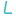
<style>
.page{position:relative;width:16px;height:16px;background:#ffffff}
.page>*{position:absolute;margin:0}
.t1{font:18px "Exo-Italic";color:#3dbbc2;scale:1.05 1}
</style>
<div class="page">
<p class="t1" style="left:3px;top:1px;width:10px;height:13px">L</p>
</div>
